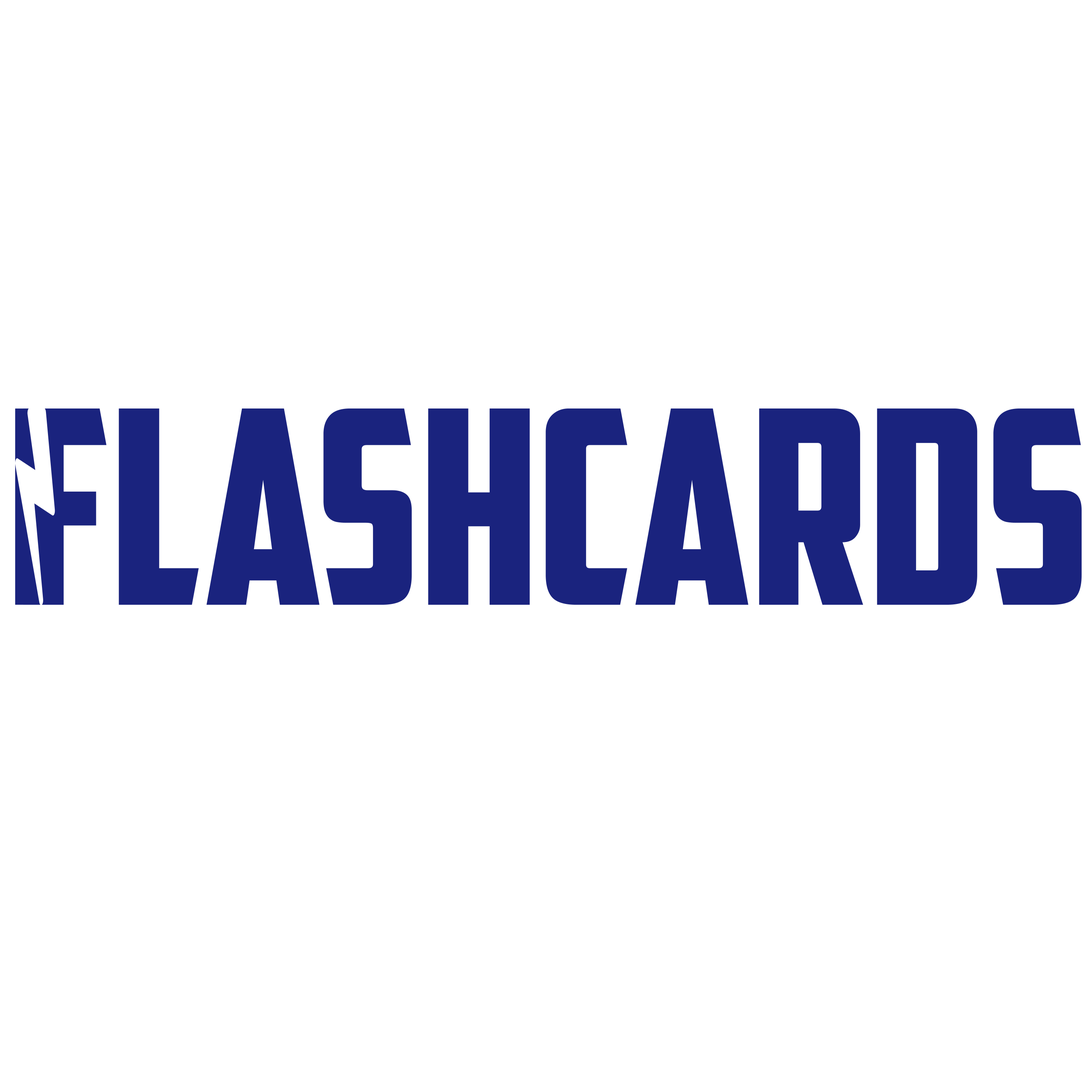
<style>
.page{position:relative;width:1092px;height:1092px;background:#ffffff}
.page>*{position:absolute;margin:0}
.t1{font:270.7px "AmericanCaptain";color:#1a237e}
</style>
<div class="page">
<p class="t1" style="left:23px;top:408px;width:1059px;height:197px">Flashcards</p>
</div>
